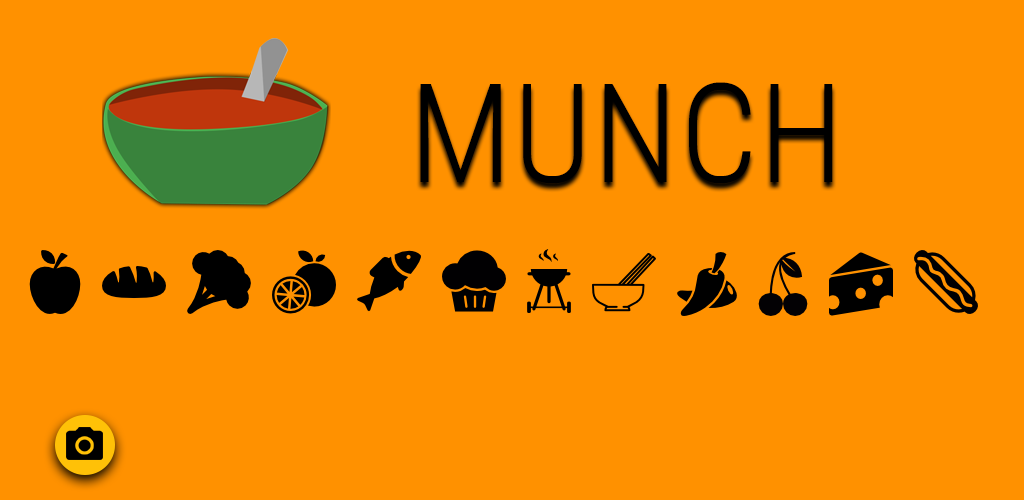
<style>
.page{position:relative;width:1024px;height:500px;background:#ff9100}
.page>*{position:absolute;margin:0}
.t1{font:138px "RobotoCondensed-Light";letter-spacing:0.01em;color:#000000}
</style>
<div class="page">
<p class="t1" style="left:420px;top:82px;width:413px;height:102px">MUNCH</p>
</div>
